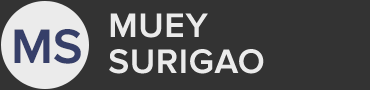
<style>
.page{position:relative;width:370px;height:90px;background:#333333}
.page>*{position:absolute;margin:0}
.t1{font:35px/36px "ProximaNova-Semibold";letter-spacing:0.025em;color:#ebebeb}
.t2{font:50px "ProximaNova-Semibold";color:#363f69}
</style>
<div class="page">
<p class="t1" style="left:109px;top:13px;width:155px;height:61px">MUEY<br>SURIGAO</p>
<p class="t2" style="left:14px;top:29px;width:67px;height:35px">MS</p>
</div>
